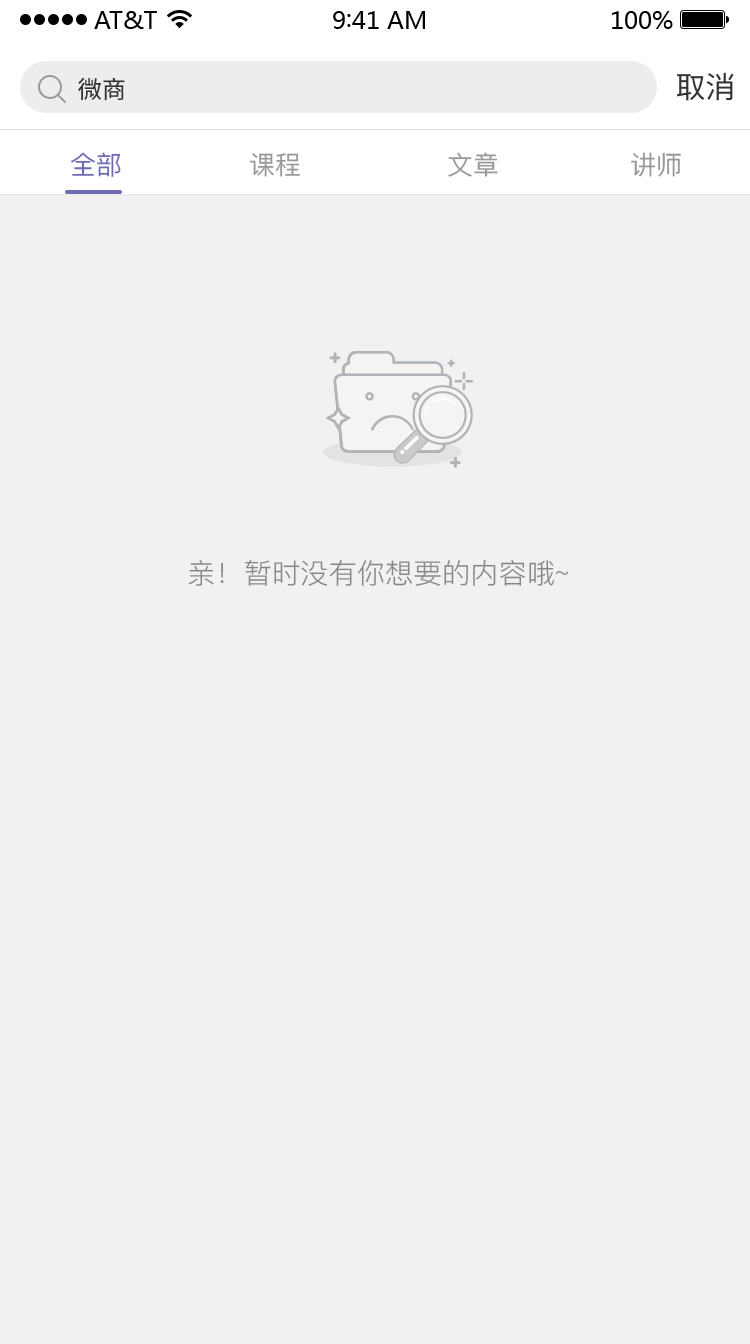
<style>
.page{position:relative;width:750px;height:1344px;background:#f1f1f1}
.page>*{position:absolute;margin:0}
.t1{font:24px "SourceHanSansCN-Regular";color:#333333}
.t2{font:30px "SourceHanSansCN-Regular";color:#333333}
.t3{font:26px "PingFang-SC-Medium";color:#6e6ab4}
.t4{font:26px "PingFang-SC-Medium";color:#999999}
.t5{font:28px "PingFang-SC-Regular";color:#888888}
</style>
<div class="page">
<p class="t1" style="left:78px;top:77px;width:47px;height:24px">微商</p>
<p class="t2" style="left:676px;top:72px;width:58px;height:29px">取消</p>
<p class="t3" style="left:71px;top:152px;width:50px;height:25px">全部</p>
<p class="t4" style="left:249px;top:153px;width:51px;height:24px">课程</p>
<p class="t4" style="left:448px;top:152px;width:50px;height:25px">文章</p>
<p class="t4" style="left:631px;top:152px;width:50px;height:25px">讲师</p>
<p class="t5" style="left:188px;top:559px;width:381px;height:27px">亲！暂时没有你想要的内容哦~</p>
</div>
